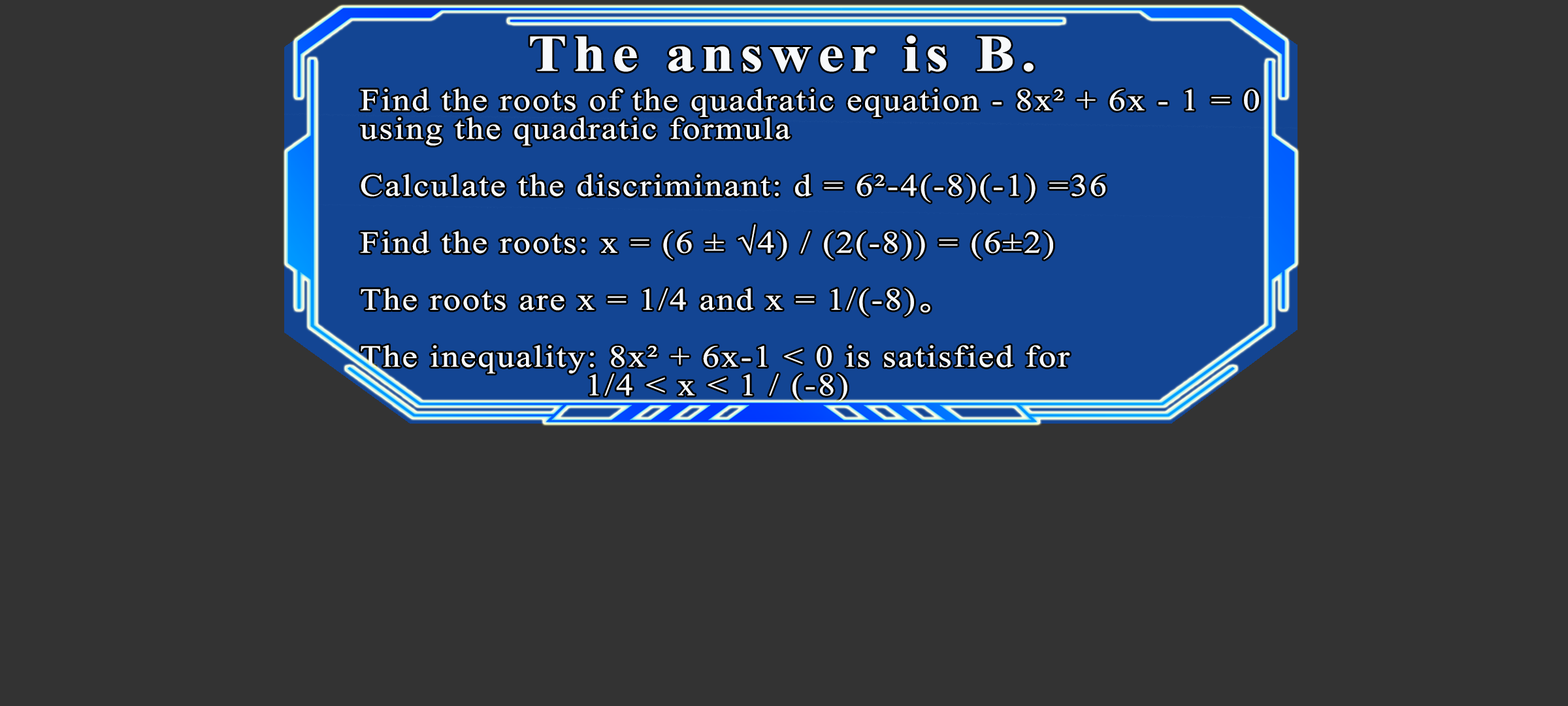
<style>
.page{position:relative;width:1568px;height:706px;background:#333333}
.page>*{position:absolute;margin:0}
.t1{font:51.7px "TimesNewRomanPS-BoldMT";letter-spacing:0.115em;color:#f7f9fb;scale:1.12 1}
.t2{font:30.9px/28.5px "TimesNewRomanPSMT";letter-spacing:0.055em;color:#f7f9fb;scale:1.12 1}
.t3{font:30.9px/28.5px "MS-Gothic";letter-spacing:0.055em;color:#f7f9fb;scale:1.12 1}
</style>
<div class="page">
<p class="t1" style="left:530px;top:35px;width:504px;height:37px">The answer is B.</p>
<p class="t2" style="left:360px;top:88px;width:899px;height:314px">Find the roots of the quadratic equation - 8x² + 6x - 1 = 0<br>using the quadratic formula<br><br>Calculate the discriminant: d = 6²-4(-8)(-1) =36<br><br>Find the roots: x = (6 ± √4) / (2(-8)) = (6±2)<br><br>The roots are x = 1/4 and x = 1/(-8)<span class="t3">。</span><br><br>The inequality: 8x² + 6x-1 &lt; 0 is satisfied for<br>           1/4 &lt; x &lt; 1 / (-8)</p>
</div>
